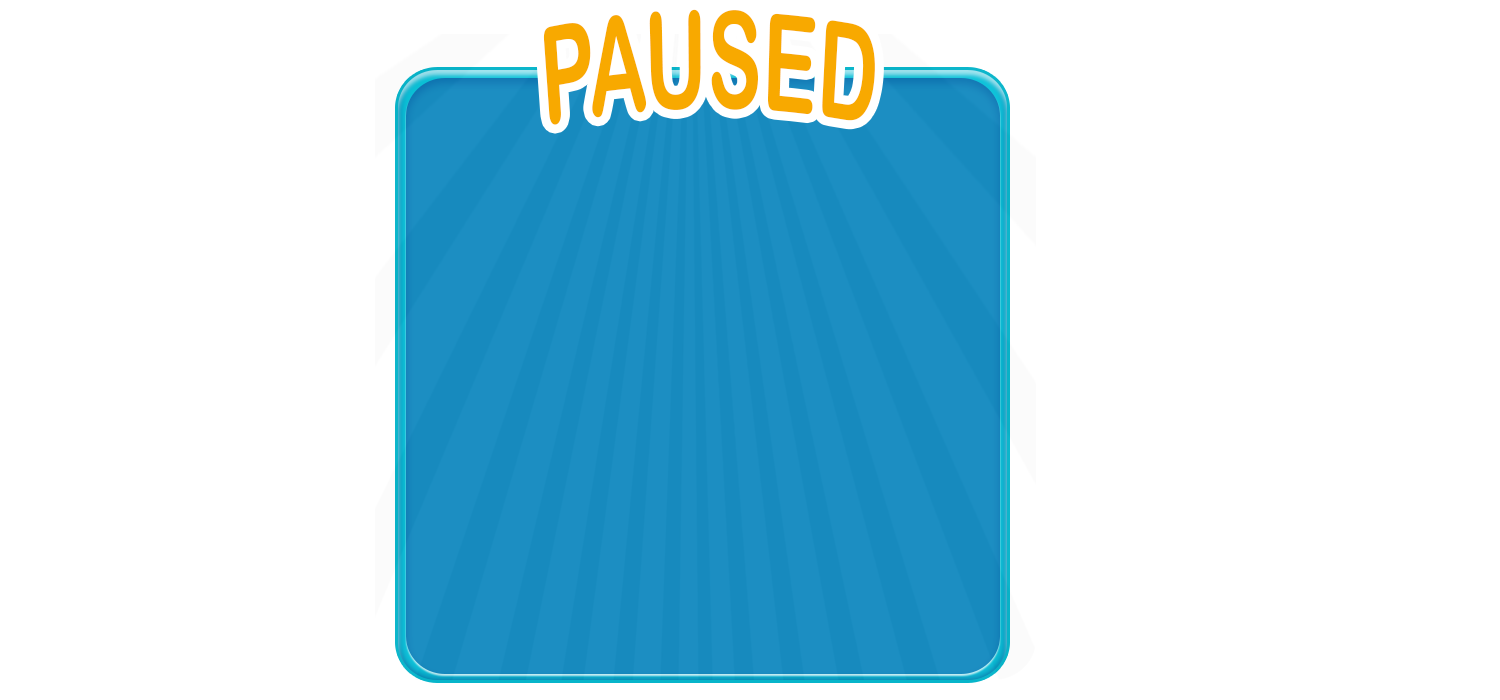
<style>
.page{position:relative;width:1500px;height:700px;background:#ffffff}
.page>*{position:absolute;margin:0}
.t1{font:135.9px "ArialRoundedMTBold";color:#f8a900;text-transform:uppercase;scale:0.59 1}
</style>
<div class="page">
<p class="t1" style="left:543px;top:9px;width:332px;height:116px">PAUSED</p>
</div>
